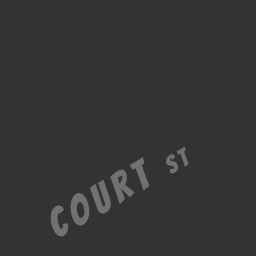
<style>
.page{position:relative;width:256px;height:256px;background:#333333}
.page>*{position:absolute;margin:0}
.t1{font:40px "Bangers-Regular";letter-spacing:0.16em;color:#717171}
.t2{font:24px "Bangers-Regular";letter-spacing:0.16em;color:#717171}
</style>
<div class="page">
<p class="t1" style="left:50px;top:146px;width:139px;height:91px;rotate:-30deg">COURT <span class="t2">ST</span></p>
</div>
